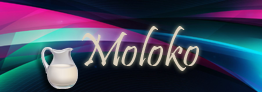
<style>
.page{position:relative;width:262px;height:92px}
.page>*{position:absolute;margin:0}
.t1{font:48px "Pristina-Regular";color:#ddd1bd}
</style>
<div class="page">
<p class="t1" style="left:81px;top:26px;width:118px;height:45px">Moloko</p>
</div>
